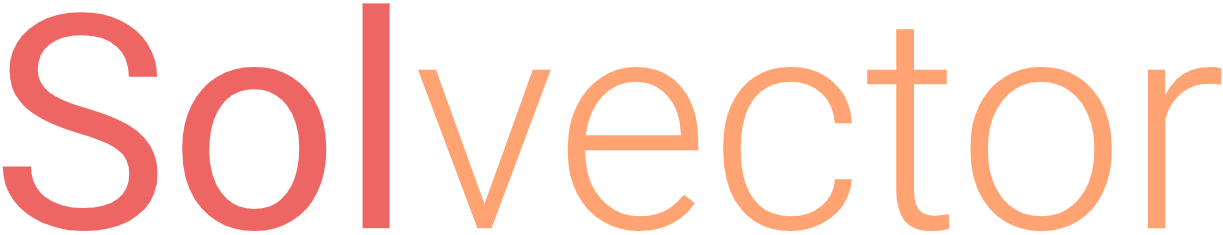
<style>
.page{position:relative;width:1223px;height:235px;background:#ffffff}
.page>*{position:absolute;margin:0}
.t1{font:299.7px "Roboto-Light";color:#ffa372}
.t2{font:299.7px "Roboto-Regular";color:#ed6663}
</style>
<div class="page">
<p class="t1" style="left:2px;top:3px;width:1220px;height:228px"><span class="t2">Sol</span>vector</p>
</div>
